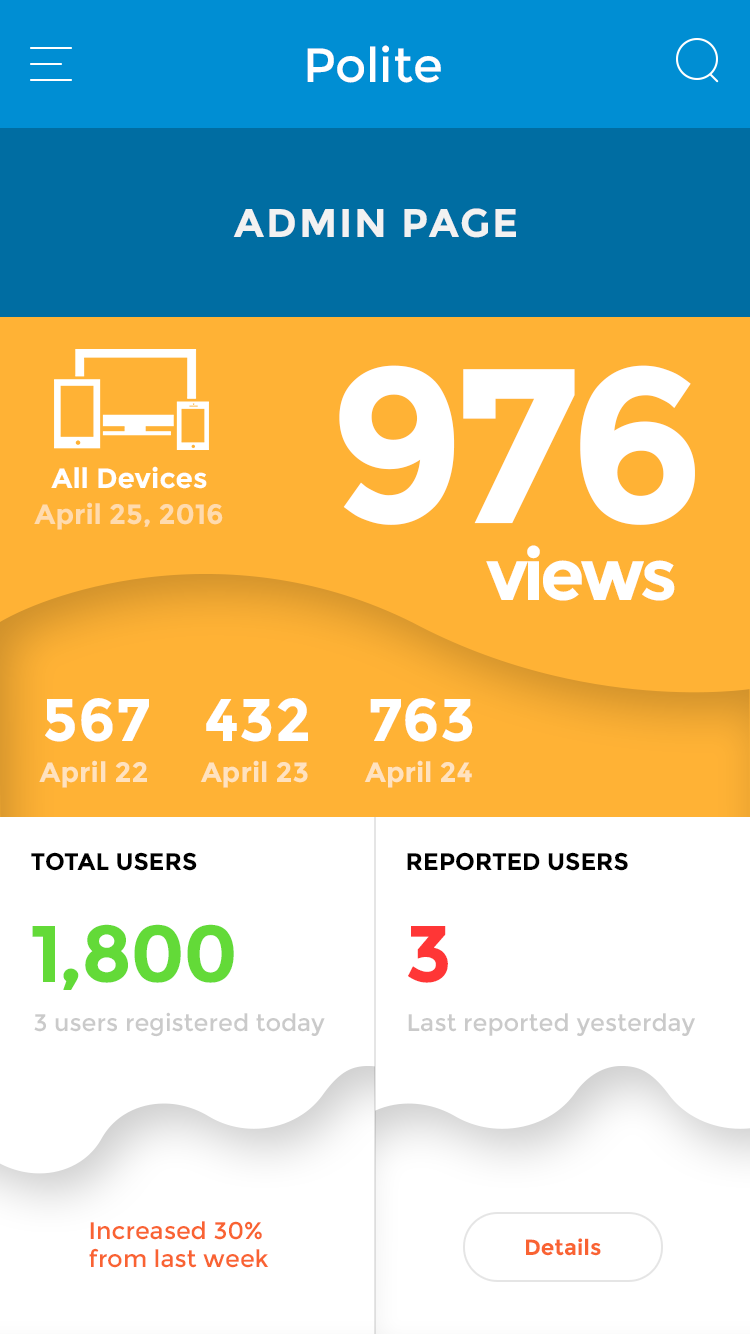
<style>
.page{position:relative;width:750px;height:1334px;background:#ffffff}
.page>*{position:absolute;margin:0}
.t1{font:48px "Montserrat-Regular";color:#ffffff}
.t2{font:40px "Montserrat-Bold";letter-spacing:0.05em;color:#ffffff}
.t3{font:220px "Montserrat-Bold";letter-spacing:-0.06em;color:#ffffff}
.t4{font:28px "Montserrat-Bold";color:#ffffff}
.t5{font:28px "Montserrat-Bold";color:#ffdbae}
.t6{font:72px "Montserrat-Bold";letter-spacing:-0.06em;color:#ffffff}
.t7{font:60px "Montserrat-Bold";color:#ffffff}
.t8{font:28px "Montserrat-Bold";color:#ffe2bf}
.t9{font:24px "Montserrat-Bold";color:#000000}
.t10{font:80px "Montserrat-Bold";letter-spacing:-0.03em;color:#63da38}
.t11{font:80px "Montserrat-Bold";letter-spacing:-0.03em;color:#ff3636}
.t12{font:24px "Montserrat-Regular";color:#cacaca}
.t13{font:24px "Montserrat-Regular";color:#f96332}
.t14{font:22px "Montserrat-Bold";color:#f96332}
</style>
<div class="page">
<p class="t1" style="left:307px;top:45px;width:134px;height:38px">Polite</p>
<p class="t2" style="left:233px;top:208px;width:283px;height:30px">ADMIN PAGE</p>
<p class="t3" style="left:339px;top:365px;width:356px;height:160px">976</p>
<p class="t4" style="left:51px;top:466px;width:156px;height:23px">All Devices</p>
<p class="t5" style="left:34px;top:502px;width:189px;height:28px">April 25, 2016</p>
<p class="t6" style="left:486px;top:545px;width:189px;height:56px">views</p>
<p class="t7" style="left:45px;top:698px;width:104px;height:44px">567</p>
<p class="t7" style="left:206px;top:698px;width:102px;height:44px">432</p>
<p class="t7" style="left:370px;top:698px;width:103px;height:44px">763</p>
<p class="t8" style="left:39px;top:760px;width:108px;height:28px">April 22</p>
<p class="t8" style="left:200px;top:760px;width:108px;height:28px">April 23</p>
<p class="t8" style="left:364px;top:760px;width:108px;height:28px">April 24</p>
<p class="t9" style="left:31px;top:852px;width:166px;height:19px">TOTAL USERS</p>
<p class="t9" style="left:407px;top:852px;width:221px;height:19px">REPORTED USERS</p>
<p class="t10" style="left:32px;top:924px;width:202px;height:66px">1,800</p>
<p class="t11" style="left:408px;top:926px;width:40px;height:57px">3</p>
<p class="t12" style="left:34px;top:1012px;width:291px;height:25px">3 users registered today</p>
<p class="t12" style="left:408px;top:1013px;width:287px;height:23px">Last reported yesterday</p>
<p class="t13" style="left:89px;top:1221px;width:180px;height:47px">Increased 30% <br>from last week</p>
<p class="t14" style="left:526px;top:1238px;width:75px;height:18px">Details</p>
</div>
